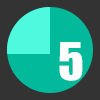
<style>
.page{position:relative;width:100px;height:100px;background:#333333}
.page>*{position:absolute;margin:0}
.t1{font:48px "Impact";letter-spacing:0.3em;color:#ffffff}
</style>
<div class="page">
<p class="t1" style="left:59px;top:42px;width:24px;height:39px">5</p>
</div>
